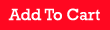
<style>
.page{position:relative;width:110px;height:30px;background:#ff0821}
.page>*{position:absolute;margin:0}
.t1{font:16.5px "Rockwell";color:#ffffff}
</style>
<div class="page">
<p class="t1" style="left:8px;top:8px;width:92px;height:13px">Add To Cart</p>
</div>
